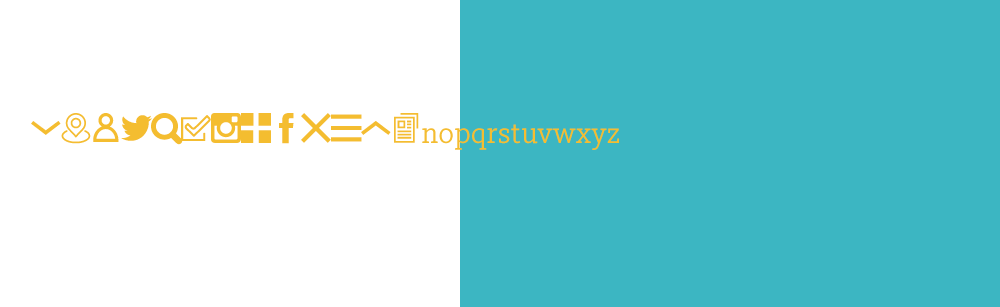
<style>
.page{position:relative;width:1000px;height:307px;background:#3cb6c2}
.page>*{position:absolute;margin:0}
.t1{font:30px "as";color:#f4bd30}
.t2{font:30px "KievitSlabOT";color:#f4bd30}
</style>
<div class="page">
<p class="t1" style="left:31px;top:113px;width:588px;height:37px">abcdefghijklm<span class="t2">nopqrstuvwxyz</span></p>
</div>
